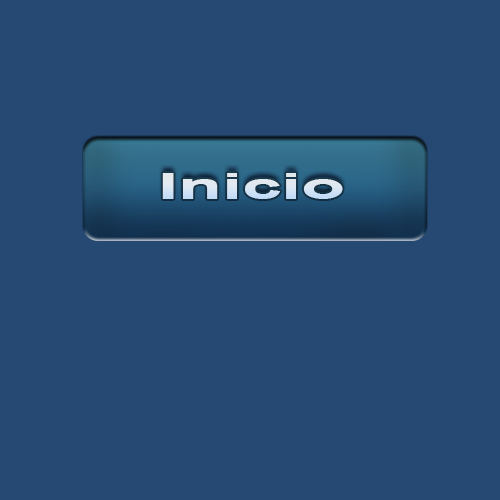
<style>
.page{position:relative;width:500px;height:500px;background:#254972}
.page>*{position:absolute;margin:0}
.t1{font:35.6px "Arial-BoldMT";color:#e8edf2;scale:2.01 1}
</style>
<div class="page">
<p class="t1" style="left:162px;top:173px;width:181px;height:26px">Inicio</p>
</div>
